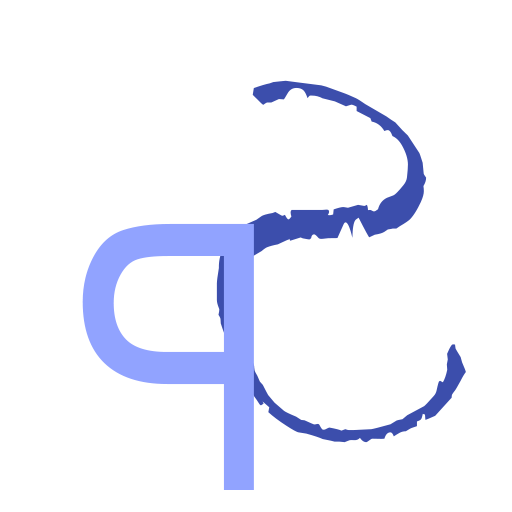
<style>
.page{position:relative;width:512px;height:512px;background:#ffffff}
.page>*{position:absolute;margin:0}
.t1{font:372px "Papyrus-Regular";color:#3c4eac;scale:0.73 1}
.t2{font:372px "MicrosoftSansSerif";color:#91a3ff;scale:0.85 1}
</style>
<div class="page">
<p class="t1" style="left:216px;top:80px;width:250px;height:363px;rotate:180deg">S</p>
<p class="t2" style="left:82px;top:223px;width:172px;height:267px;rotate:180deg">P</p>
</div>
